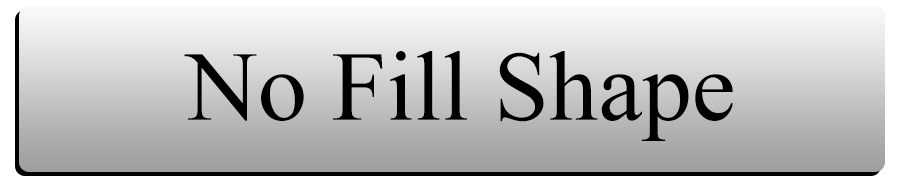
<style>
.page{position:relative;width:900px;height:183px}
.page>*{position:absolute;margin:0}
.t1{font:98.9px "TimesNewRomanPSMT";color:#000000}
</style>
<div class="page">
<p class="t1" style="left:184px;top:51px;width:549px;height:90px">No Fill Shape</p>
</div>
